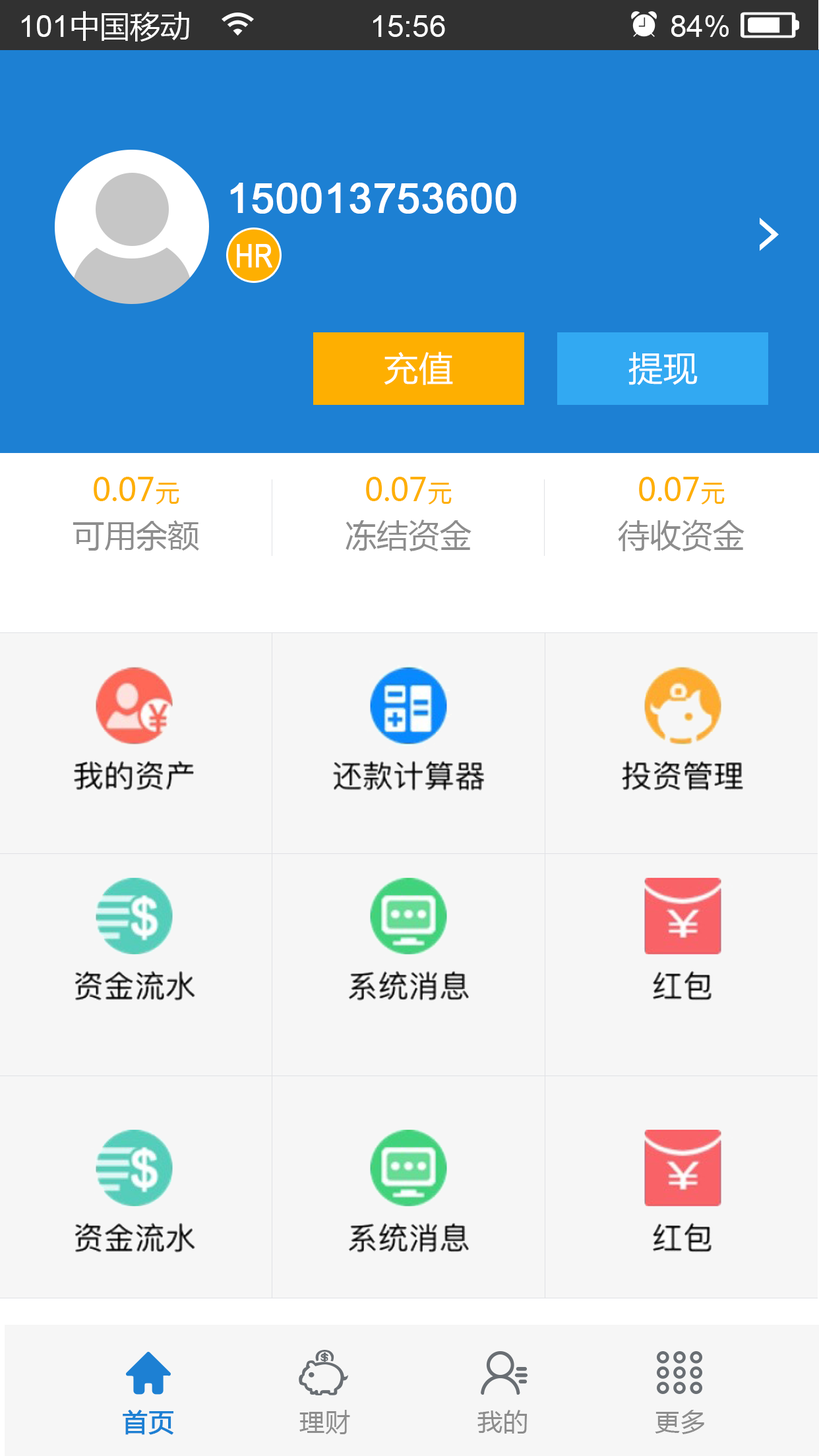
<style>
.page{position:relative;width:819px;height:1456px;background:#f6f6f6}
.page>*{position:absolute;margin:0}
.t1{font:30.3px "ArialMT";color:#ffffff}
.t2{font:30.3px "MicrosoftYaHei";color:#ffffff}
.t3{font:41.3px "ArialMT";color:#ffffff;font-weight:bold}
.t4{font:32.3px "ArialMT";color:#ffffff;font-weight:bold;scale:0.78 1}
.t5{font:34.3px "MicrosoftYaHei";letter-spacing:0.025em;color:#ffffff}
.t6{font:31.7px "MicrosoftYaHei";color:#feaf01}
.t7{font:23.7px "MicrosoftYaHei";color:#feaf01}
.t8{font:31.7px "MicrosoftYaHei";color:#8d8d8d}
.t9{font:25.1px "MicrosoftYaHei";letter-spacing:0.025em;color:#1d80d3;font-weight:bold}
.t10{font:25.1px "MicrosoftYaHei";letter-spacing:0.025em;color:#8d8d8d}
</style>
<div class="page">
<p class="t1" style="left:22px;top:11px;width:707px;height:31px">101<span class="t2">中国移动                    </span>15:56                         84%</p>
<p class="t3" style="left:230px;top:183px;width:286px;height:31px">150013753600</p>
<p class="t4" style="left:237px;top:244px;width:35px;height:24px">HR</p>
<p class="t5" style="left:384px;top:351px;width:69px;height:34px">充值</p>
<p class="t5" style="left:628px;top:352px;width:70px;height:33px">提现</p>
<p class="t6" style="left:94px;top:477px;width:85px;height:27px">0.07<span class="t7">元</span></p>
<p class="t6" style="left:366px;top:477px;width:86px;height:27px">0.07<span class="t7">元</span></p>
<p class="t6" style="left:639px;top:477px;width:86px;height:27px">0.07<span class="t7">元</span></p>
<p class="t8" style="left:73px;top:520px;width:126px;height:31px">可用余额</p>
<p class="t8" style="left:346px;top:520px;width:125px;height:31px">冻结资金</p>
<p class="t8" style="left:618px;top:520px;width:126px;height:31px">待收资金</p>
<p class="t9" style="left:123px;top:1410px;width:50px;height:25px">首页</p>
<p class="t10" style="left:299px;top:1410px;width:51px;height:24px">理财</p>
<p class="t10" style="left:477px;top:1410px;width:50px;height:24px">我的</p>
<p class="t10" style="left:655px;top:1410px;width:49px;height:24px">更多</p>
</div>
